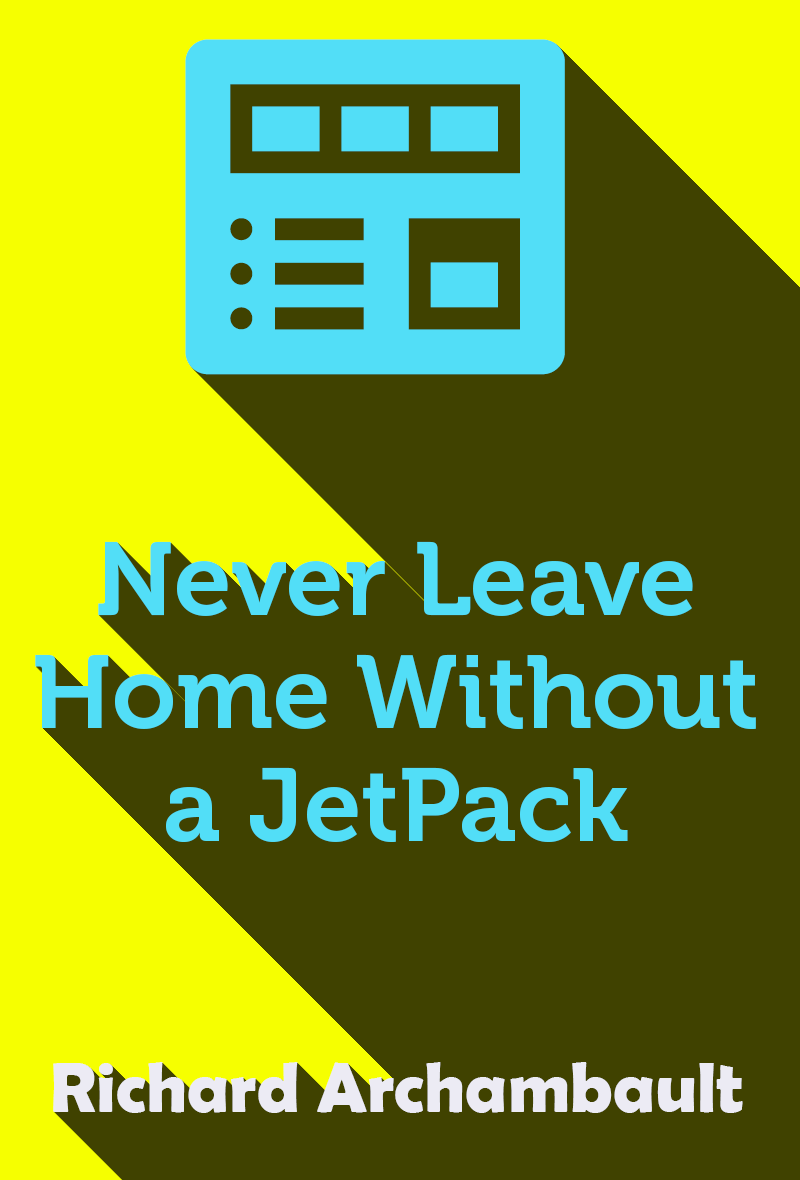
<style>
.page{position:relative;width:800px;height:1180px;background:#404200}
.page>*{position:absolute;margin:0}
.t1{font:103px/113px "Museo-700";color:#52def7}
.t2{font:72px "BerlinSansFBDemi-Bold";color:#ecebf4}
</style>
<div class="page">
<p class="t1" style="left:35px;top:541px;width:721px;height:301px;text-align:center">Never Leave Home Without a JetPack</p>
<p class="t2" style="left:53px;top:1062px;width:690px;height:51px">Richard Archambault</p>
</div>
